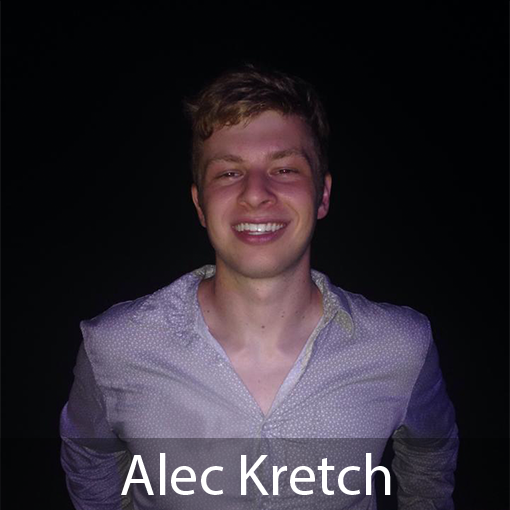
<style>
.page{position:relative;width:510px;height:510px}
.page>*{position:absolute;margin:0}
.t1{font:58.3px "MyriadPro-Regular";color:#ffffff}
</style>
<div class="page">
<p class="t1" style="left:121px;top:453px;width:270px;height:42px">Alec Kretch</p>
</div>
